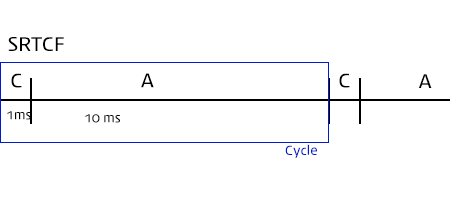
<style>
.page{position:relative;width:450px;height:200px;background:#ffffff}
.page>*{position:absolute;margin:0}
.t1{font:18px "Daum_Regular";color:#000000}
.t2{font:12px "Daum_Regular";color:#000000}
.t3{font:12px "Daum_Regular";color:#001dcd}
</style>
<div class="page">
<p class="t1" style="left:8px;top:37px;width:56px;height:14px">SRTCF</p>
<p class="t1" style="left:11px;top:73px;width:11px;height:15px">C</p>
<p class="t1" style="left:141px;top:73px;width:13px;height:15px">A</p>
<p class="t1" style="left:339px;top:73px;width:11px;height:15px">C</p>
<p class="t1" style="left:418px;top:74px;width:14px;height:14px">A</p>
<p class="t2" style="left:7px;top:111px;width:24px;height:9px">1ms</p>
<p class="t2" style="left:85px;top:114px;width:35px;height:9px">10 ms</p>
<p class="t3" style="left:285px;top:144px;width:32px;height:14px">Cycle</p>
</div>
